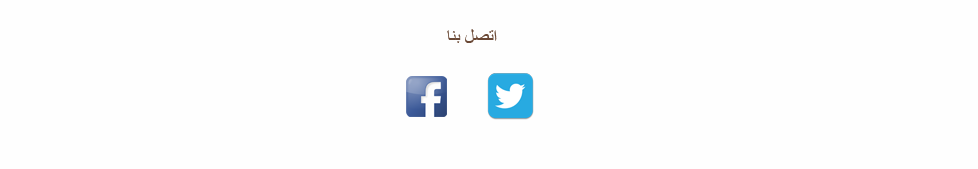
<style>
.page{position:relative;width:978px;height:169px;background:#fefefe}
.page>*{position:absolute;margin:0}
.t1{font:18px "TimesNewRomanPSMT";color:#6a4835}
</style>
<div class="page">
<p class="t1" style="left:447px;top:29px;width:50px;height:14px">اتصل بنا</p>
</div>
